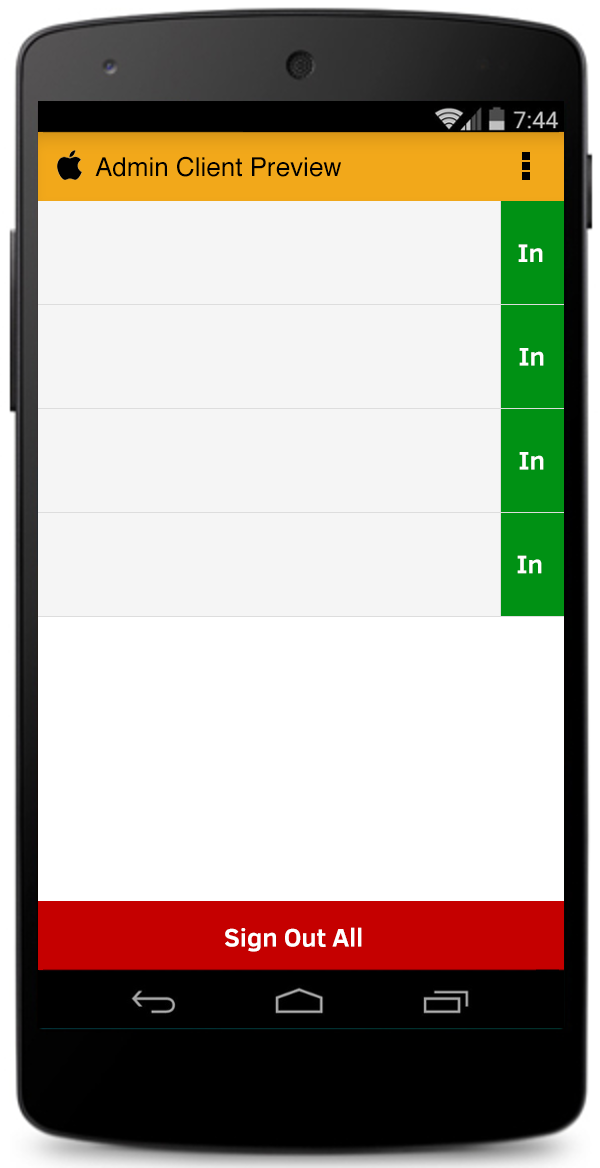
<style>
.page{position:relative;width:600px;height:1168px;background:#f5f5f5}
.page>*{position:absolute;margin:0}
.t1{font:26px "Helvetica";color:#000000}
.t2{font:26px "ClearSans-Bold";color:#ffffff}
</style>
<div class="page">
<p class="t1" style="left:95px;top:156px;width:246px;height:21px">Admin Client Preview</p>
<p class="t2" style="left:518px;top:244px;width:25px;height:18px">In</p>
<p class="t2" style="left:519px;top:348px;width:25px;height:18px">In</p>
<p class="t2" style="left:519px;top:452px;width:25px;height:18px">In</p>
<p class="t2" style="left:517px;top:555px;width:25px;height:19px">In</p>
<p class="t2" style="left:225px;top:927px;width:137px;height:25px">Sign Out All</p>
</div>
